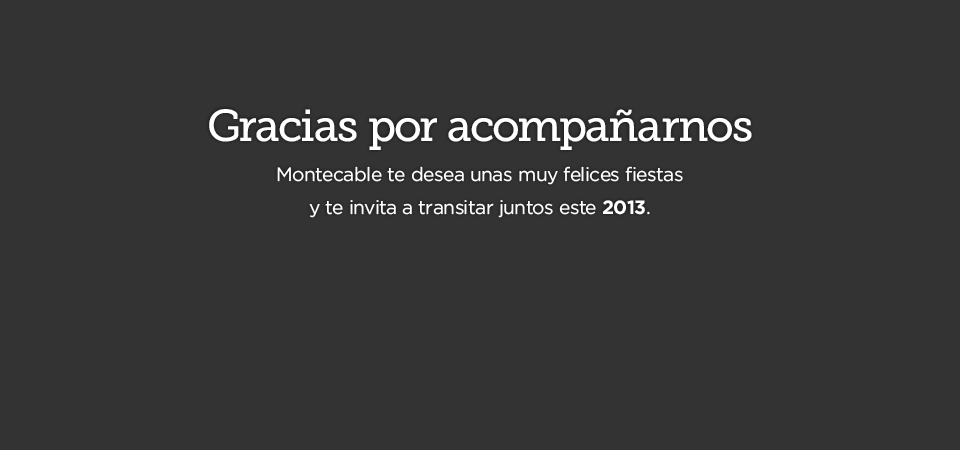
<style>
.page{position:relative;width:960px;height:450px;background:#333333}
.page>*{position:absolute;margin:0}
.t1{font:44.6px "MuseoSlab-500";letter-spacing:-0.02em;color:#ffffff}
.t2{font:19.2px/33.6px "Gotham-Book";letter-spacing:-0.02em;color:#ffffff}
.t3{font:19.2px/33.6px "Gotham-Bold";letter-spacing:-0.02em;color:#ffffff}
</style>
<div class="page">
<p class="t1" style="left:209px;top:109px;width:543px;height:41px">Gracias por acompañarnos</p>
<p class="t2" style="left:277px;top:166px;width:406px;height:52px;text-align:center">Montecable te desea unas muy felices fiestas<br>y te invita a transitar juntos este <span class="t3">2013</span>.</p>
</div>
